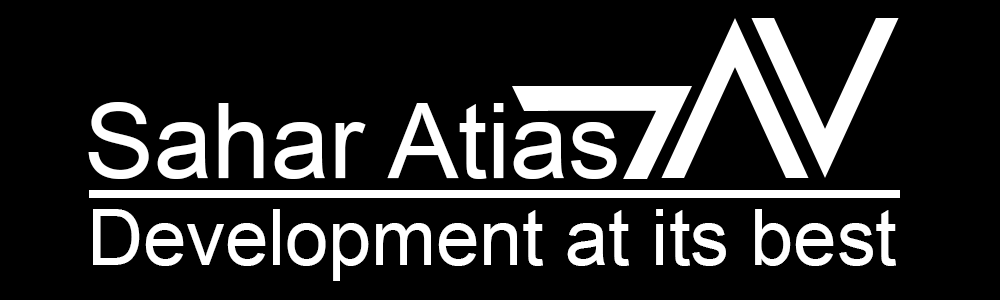
<style>
.page{position:relative;width:1000px;height:300px;background:#000000}
.page>*{position:absolute;margin:0}
.t1{font:105px "ArialMT";color:#ffffff}
.t2{font:77.5px "ArialMT";color:#ffffff}
</style>
<div class="page">
<p class="t1" style="left:88px;top:102px;width:529px;height:77px">Sahar Atias</p>
<p class="t2" style="left:93px;top:209px;width:803px;height:72px">Development at its best</p>
</div>
